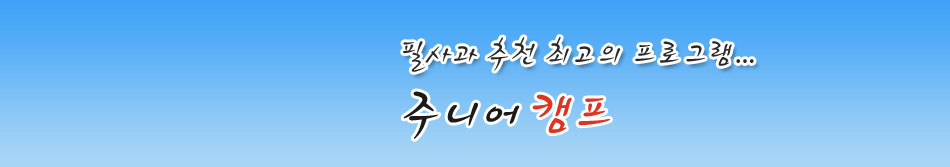
<style>
.page{position:relative;width:950px;height:167px}
.page>*{position:absolute;margin:0}
.t1{font:36px "SJSoju2";letter-spacing:-0.05em;color:#282828;scale:0.95 1}
.t2{font:60px "SJSoju2";letter-spacing:-0.1em;color:#1a1a1a;text-transform:uppercase;scale:0.95 1}
.t3{font:60px "SJSoju2";letter-spacing:-0.1em;color:#df341f;text-transform:uppercase;scale:0.95 1}
</style>
<div class="page">
<p class="t1" style="left:403px;top:37px;width:351px;height:35px">필사과 추천 최고의 프로그램...</p>
<p class="t2" style="left:403px;top:91px;width:207px;height:48px">주니어 <span class="t3">캠프</span></p>
</div>
